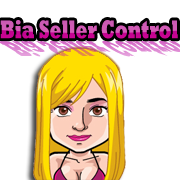
<style>
.page{position:relative;width:180px;height:180px;background:#ffffff}
.page>*{position:absolute;margin:0}
.t1{font:26.2px "Rockwell-ExtraBold";scale:0.65 1}
</style>
<div class="page">
<p class="t1" style="left:0px;top:20px;width:178px;height:19px">Bia Seller Control</p>
</div>
